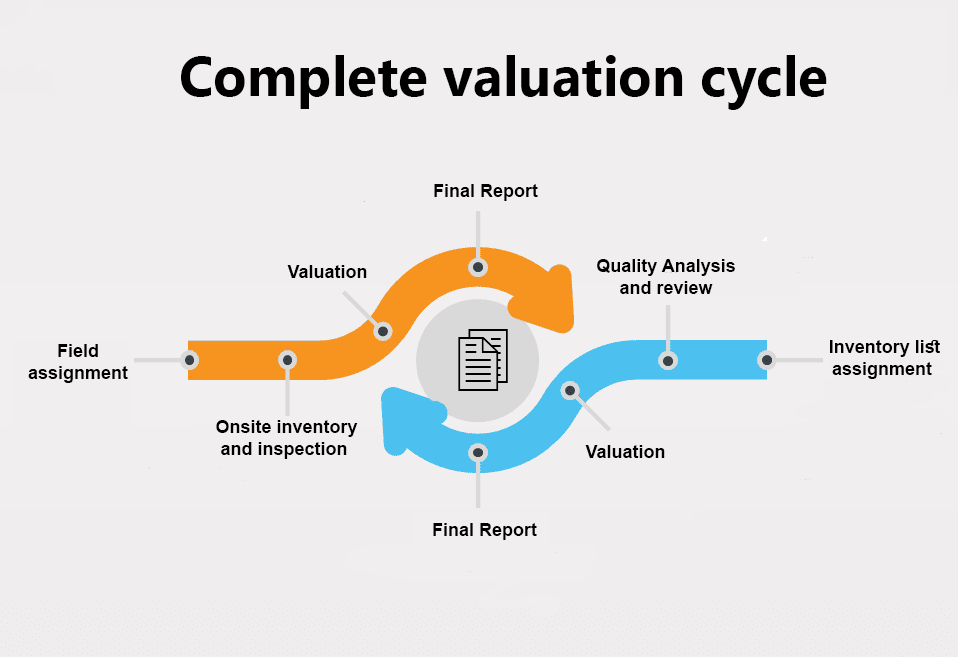
<style>
.page{position:relative;width:960px;height:657px;background:#f0eeef}
.page>*{position:absolute;margin:0}
.t1{font:55px "MyanmarText-Bold";color:#000000}
.t2{font:18px "Arial-BoldMT";color:#000000}
</style>
<div class="page">
<p class="t1" style="left:181px;top:55px;width:646px;height:55px">Complete valuation cycle</p>
<p class="t2" style="left:434px;top:184px;width:104px;height:17px">Final Report</p>
<p class="t2" style="left:287px;top:265px;width:80px;height:13px">Valuation</p>
<p class="t2" style="left:597px;top:259px;width:138px;height:35px;text-align:center">Quality Analysis<br>and review</p>
<p class="t2" style="left:830px;top:340px;width:110px;height:39px;text-align:center">Inventory list <br>assignment</p>
<p class="t2" style="left:28px;top:344px;width:100px;height:39px;text-align:center">Field<br> assignment</p>
<p class="t2" style="left:216px;top:420px;width:142px;height:39px;text-align:center">Onsite inventory <br>and inspection</p>
<p class="t2" style="left:585px;top:445px;width:80px;height:13px">Valuation</p>
<p class="t2" style="left:433px;top:523px;width:104px;height:17px">Final Report</p>
</div>
